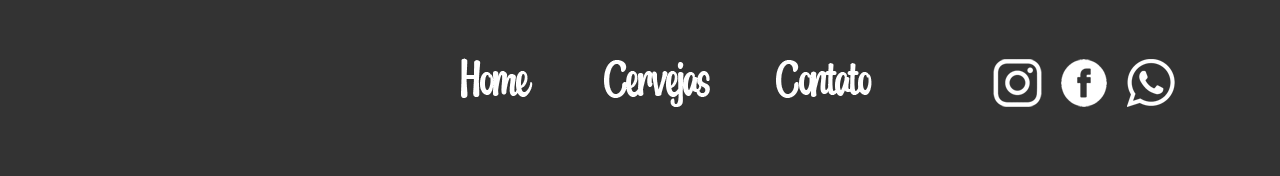
<style>
.page{position:relative;width:1280px;height:176px;background:#333333}
.page>*{position:absolute;margin:0}
.t1{font:53.9px "MangoDrink-Regular";letter-spacing:-0.025em;color:#ffffff}
</style>
<div class="page">
<p class="t1" style="left:461px;top:58px;width:411px;height:49px">Home        Cervejas       Contato</p>
</div>
